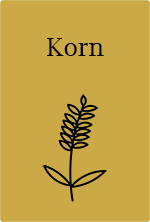
<style>
.page{position:relative;width:150px;height:222px;background:#cba947}
.page>*{position:absolute;margin:0}
.t1{font:24px "LucidaBright";color:#000000}
.t2{font:36px "LucidaBright";color:#000000}
</style>
<div class="page">
<p class="t1" style="left:47px;top:38px;width:57px;height:18px"><span class="t2"><br></span>Korn</p>
</div>
